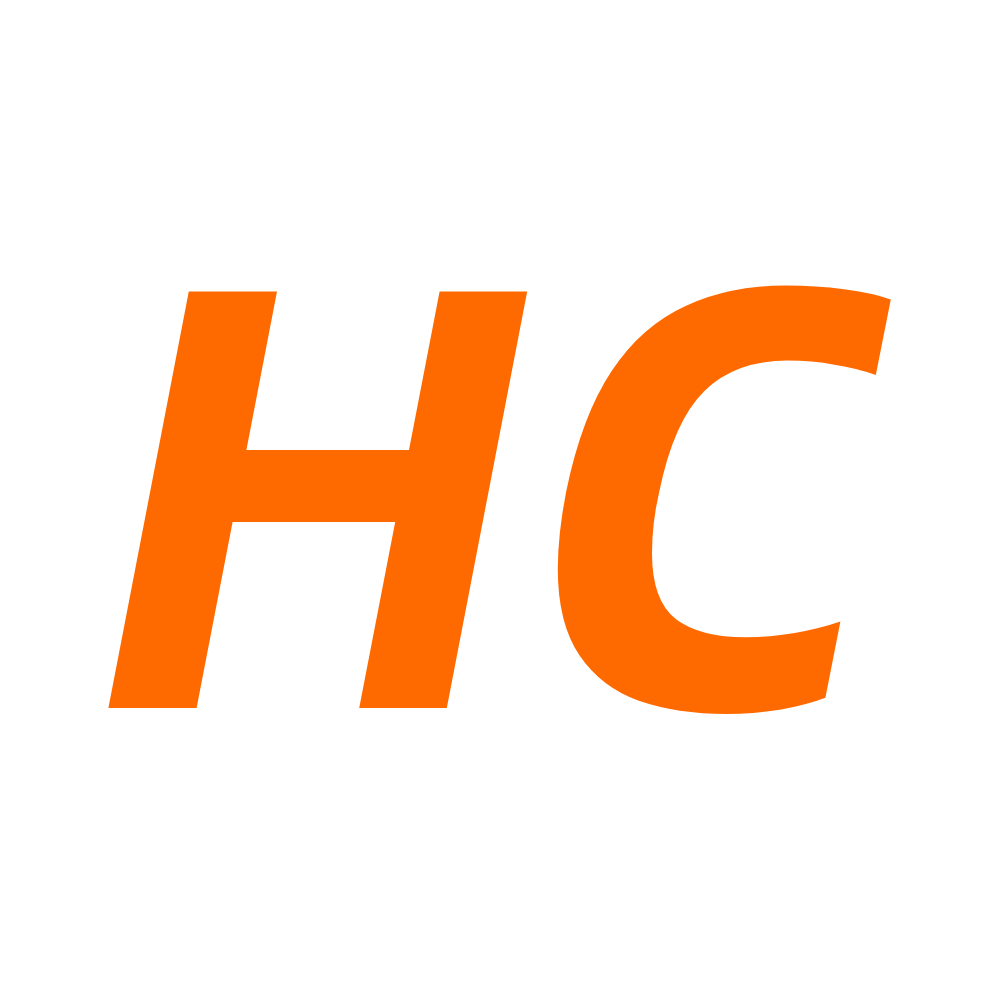
<style>
.page{position:relative;width:1000px;height:1000px;background:#ffffff}
.page>*{position:absolute;margin:0}
.t1{font:600px "AlibabaSans-BoldItalic";color:#ff6a00}
</style>
<div class="page">
<p class="t1" style="left:108px;top:285px;width:783px;height:429px">HC</p>
</div>
